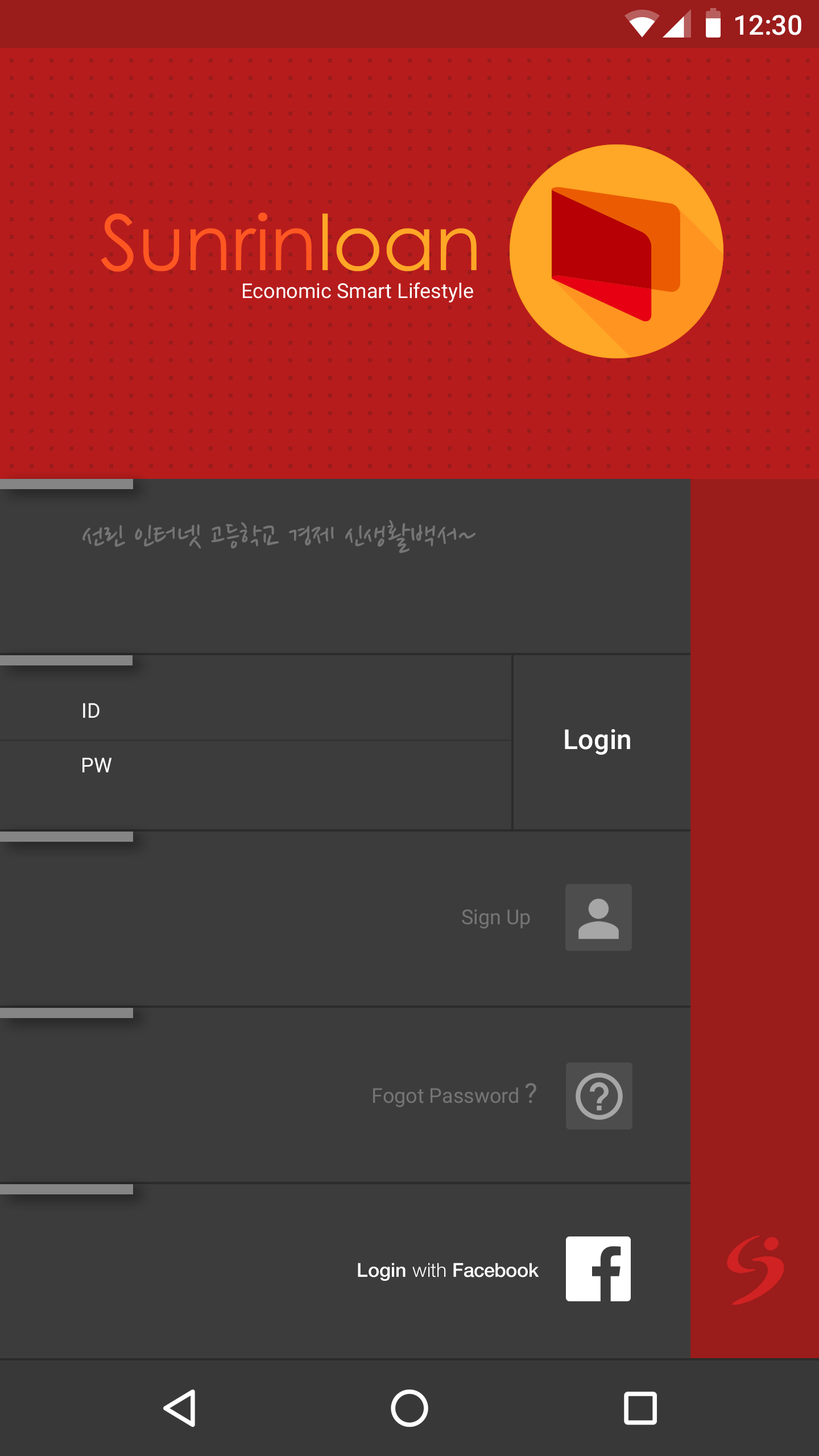
<style>
.page{position:relative;width:819px;height:1456px;background:#3c3c3c}
.page>*{position:absolute;margin:0}
.t1{font:27.3px "Roboto-Medium";color:#ffffff}
.t2{font:34.1px "NanumPen";color:#757575}
.t3{font:20.5px "Roboto-Regular";color:#fefefe}
.t4{font:20.5px "Roboto-Regular";color:#757575}
.t5{font:27.3px "Roboto-Regular";color:#757575}
</style>
<div class="page">
<p class="t1" style="left:735px;top:15px;width:66px;height:20px">12:30</p>
<p class="t2" style="left:82px;top:520px;width:394px;height:33px">선린 인터넷 고등학교 경제 신생활백서~</p>
<p class="t3" style="left:83px;top:703px;width:17px;height:15px">ID</p>
<p class="t1" style="left:565px;top:729px;width:65px;height:26px">Login</p>
<p class="t3" style="left:82px;top:758px;width:29px;height:14px">PW</p>
<p class="t4" style="left:462px;top:909px;width:68px;height:20px">Sign Up</p>
<p class="t4" style="left:373px;top:1083px;width:163px;height:24px">Fogot Password <span class="t5">?</span></p>
</div>
